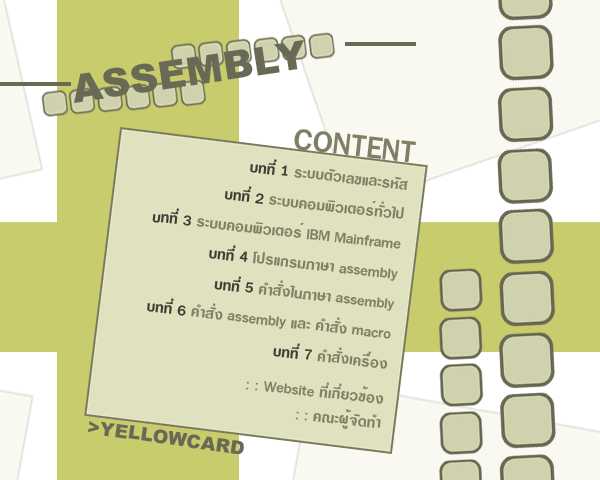
<style>
.page{position:relative;width:600px;height:480px;background:#e0e1be}
.page>*{position:absolute;margin:0}
.t1{font:38.9px "Arial-Black";letter-spacing:0.01em;color:#696a55}
.t2{font:43.2px "DSELardPhrao";letter-spacing:0.01em;color:#7e7f65}
.t3{font:20.7px/30px "DSELardPhrao";letter-spacing:0.01em;color:#7e7f65}
.t4{font:20.7px/30px "DSELardPhrao";letter-spacing:0.01em;color:#3d3d34}
.t5{font:20.7px/24px "DSELardPhrao";letter-spacing:0.01em;color:#7e7f65}
.t6{font:20.7px/36px "DSELardPhrao";letter-spacing:0.01em;color:#7e7f65}
.t7{font:18.7px "Arial-Black";letter-spacing:0.01em;color:#696a55}
</style>
<div class="page">
<p class="t1" style="left:74px;top:40px;width:230px;height:63px;rotate:-8deg">ASSEMBLY</p>
<p class="t2" style="left:294px;top:129px;width:122px;height:34px;rotate:6deg">CONTENT</p>
<p class="t3" style="left:147px;top:159px;width:261px;height:270px;text-align:right;rotate:6deg"><span class="t4">º··Õè 1</span> ระบบตัวเลขและรหัส<br><span class="t4">º··Õè 2</span> ระบบคอมพิวเตอร์ทั่วไป<br><span class="t4">º··Õè 3</span> ระบบคอมพิวเตอร์ IBM Mainframe<br><span class="t4">º··Õè 4</span> โปรแกรมภาษา assembly<br><span class="t4">º··Õè 5</span> คำสั่งในภาษา assembly<br><span class="t4">º··Õè 6</span> คำสั่ง assembly และ คำส<span class="t5">ั่ง m</span>acro<br><span class="t4"> º··Õè 7</span> คำสั่งเครื่อง<br><span class="t6"> : : Website ·Õèà¡ÕèÂÇ</span><span class="t5">¢éÍ§<br>: : ¤³Ð¼Ùé¨Ñ´·Ó</span></p>
<p class="t7" style="left:88px;top:421px;width:156px;height:33px;rotate:8deg">&gt;YELLOWCARD</p>
</div>
